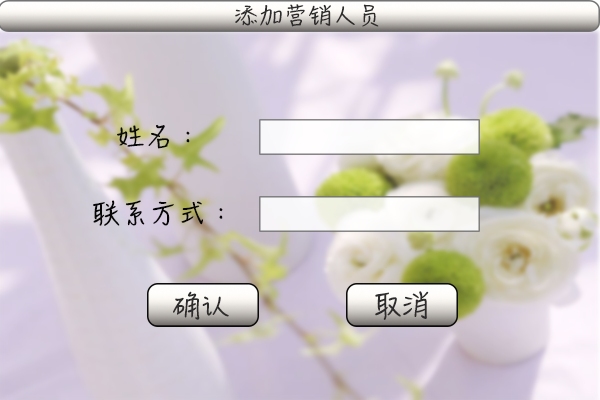
<style>
.page{position:relative;width:600px;height:400px}
.page>*{position:absolute;margin:0}
.t1{font:21.3px "HanziPenSC-W5";letter-spacing:-0.005em;color:#2d2b2b;text-transform:uppercase;scale:1.12 1}
.t2{font:24.9px "HanziPenSC-W5";letter-spacing:-0.005em;color:#0b0a0a;text-transform:uppercase;scale:1.12 1}
.t3{font:24.9px "HanziPenSC-W5";letter-spacing:-0.005em;color:#070707;text-transform:uppercase;scale:1.12 1}
</style>
<div class="page">
<p class="t1" style="left:235px;top:4px;width:144px;height:23px">添加营销人员</p>
<p class="t2" style="left:117px;top:124px;width:73px;height:25px">姓名：</p>
<p class="t3" style="left:93px;top:200px;width:130px;height:26px">联系方式：</p>
</div>
